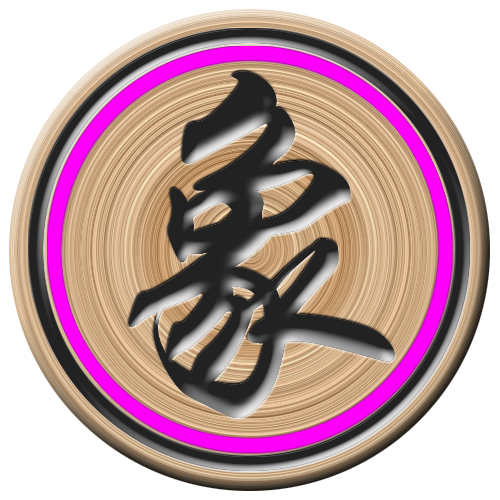
<style>
.page{position:relative;width:500px;height:500px;background:#ffffff}
.page>*{position:absolute;margin:0}
.t1{font:360px "STXingkai"}
</style>
<div class="page">
<p class="t1" style="left:129px;top:71px;width:266px;height:347px">象</p>
</div>
